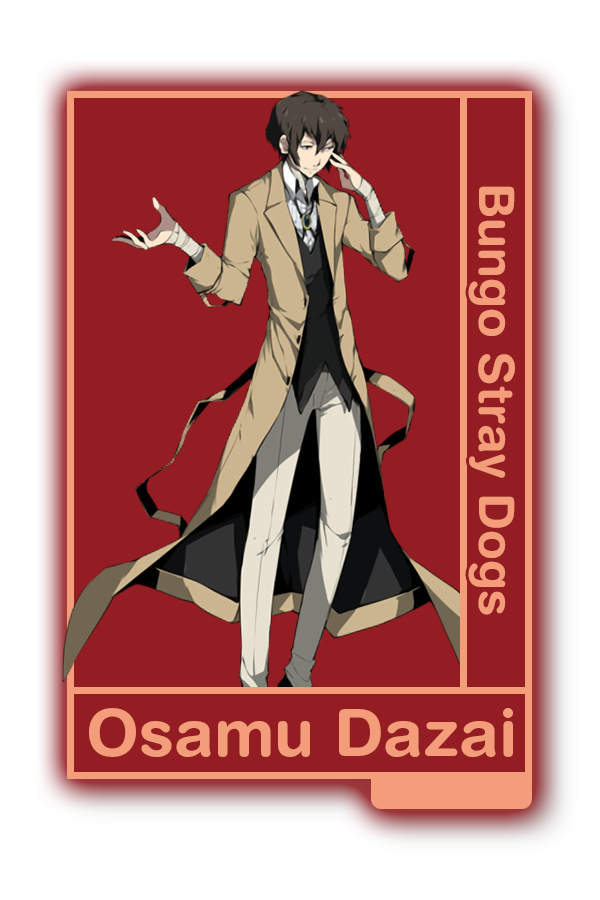
<style>
.page{position:relative;width:600px;height:900px;background:#941d23}
.page>*{position:absolute;margin:0}
.t1{font:48.8px "HelveticaRounded-Bold";color:#f39d7b}
.t2{font:65.2px "HelveticaRounded-Bold";color:#f39d7b}
</style>
<div class="page">
<p class="t1" style="left:468px;top:186px;width:47px;height:429px;rotate:90deg">Bungo Stray Dogs</p>
<p class="t2" style="left:89px;top:708px;width:424px;height:49px">Osamu Dazai</p>
</div>
